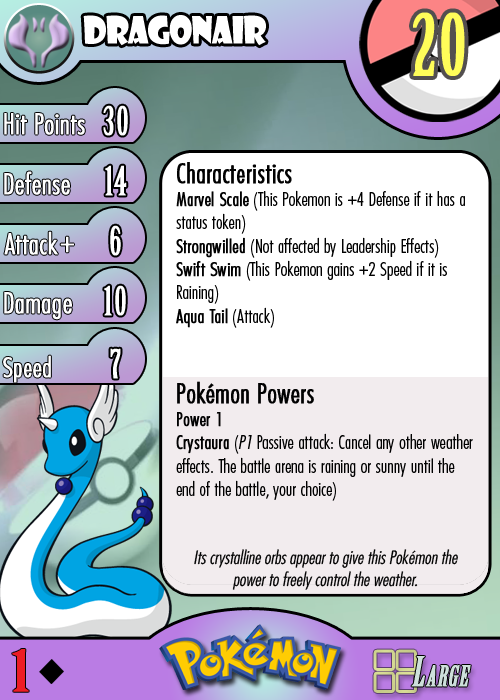
<style>
.page{position:relative;width:500px;height:700px;background:#ffffff}
.page>*{position:absolute;margin:0}
.t1{font:36.7px "ShowcardGothic-Reg";letter-spacing:-0.025em;color:#ffffff;scale:0.91 1}
.t2{font:83.3px "BirchStd";letter-spacing:0.025em;color:#fffd59;font-weight:bold}
.t3{font:27.8px "Futura-CondensedLight";color:#ffffff;font-weight:bold}
.t4{font:38.9px "BirchStd";letter-spacing:0.035em;color:#ffffff;font-weight:bold}
.t5{font:19.4px "FuturaCondensedBQ-Light";color:#010101}
.t6{font:27.8px "FuturaCondensedBQ-Light";color:#010101;font-weight:bold}
.t7{font:19.4px "FuturaCondensedBQ-Light";color:#010101;font-weight:bold}
.t8{font:19.4px "FuturaCondensedBQ-Light";color:#010101;font-style:italic}
.t9{font:30.6px "Futura-CondensedLight";color:#ffffff;font-weight:bold}
.t10{font:27.8px "FuturaCondensedBQ-Light";color:#ffffff;font-weight:bold}
.t11{font:18.1px "Futura-CondensedLight";color:#010101;font-style:italic}
.t12{font:55.6px "BirchStd";color:#ed1c24;font-weight:bold;scale:1.5 1}
</style>
<div class="page">
<p class="t1" style="left:83px;top:15px;width:183px;height:31px">dragonair</p>
<p class="t2" style="left:413px;top:12px;width:52px;height:64px">20</p>
<p class="t3" style="left:4px;top:113px;width:81px;height:22px">Hit Points</p>
<p class="t4" style="left:103px;top:105px;width:25px;height:31px">30</p>
<p class="t3" style="left:4px;top:171px;width:66px;height:24px">Defense</p>
<p class="t4" style="left:105px;top:165px;width:22px;height:31px">14</p>
<p class="t5" style="left:176px;top:162px;width:297px;height:339px"><span class="t6">Characteristics<br></span><span class="t7">Marvel Scale</span> (This Pokemon is +4 Defense if it has a status token)<br><span class="t7">Strongwilled</span> (Not affected by Leadership Effects)<br><span class="t7">Swift Swim</span> (This Pokemon gains +2 Speed if it is Raining)<br><span class="t7">Aqua Tail</span> (Attack)<br><br><br><span class="t6">Pokémon Powers<br></span><span class="t7">Power 1<br>Crystaura</span> (<span class="t8">P1</span> Passive attack: Cancel any other weather effects. The battle arena is raining or sunny until the end of the battle, your choice)</p>
<p class="t3" style="left:4px;top:231px;width:54px;height:24px">Attack</p>
<p class="t4" style="left:110px;top:225px;width:11px;height:31px">6</p>
<p class="t9" style="left:60px;top:236px;width:14px;height:17px">+</p>
<p class="t3" style="left:4px;top:292px;width:68px;height:28px">Damage</p>
<p class="t4" style="left:104px;top:285px;width:22px;height:31px">10</p>
<p class="t4" style="left:110px;top:348px;width:11px;height:31px">7</p>
<p class="t10" style="left:3px;top:355px;width:48px;height:28px">Speed</p>
<p class="t11" style="left:194px;top:549px;width:264px;height:41px;text-align:center">Its crystalline orbs appear to give this Pokémon the power to freely control the weather.</p>
<p class="t12" style="left:12px;top:649px;width:17px;height:43px">1</p>
</div>
